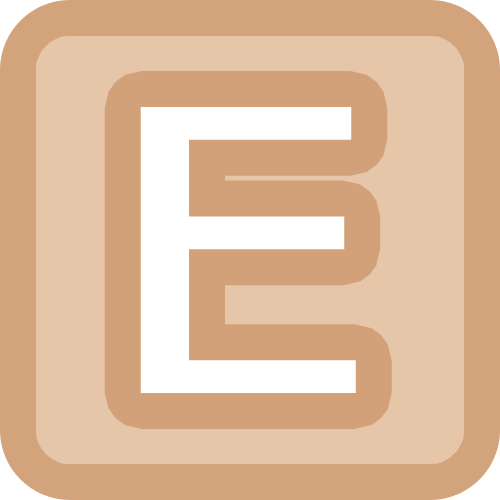
<style>
.page{position:relative;width:500px;height:500px;background:#e5c6a8}
.page>*{position:absolute;margin:0}
.t1{font:392px "Menlo-Regular";color:#ffffff;scale:1.24 1}
</style>
<div class="page">
<p class="t1" style="left:140px;top:107px;width:216px;height:286px">E</p>
</div>
